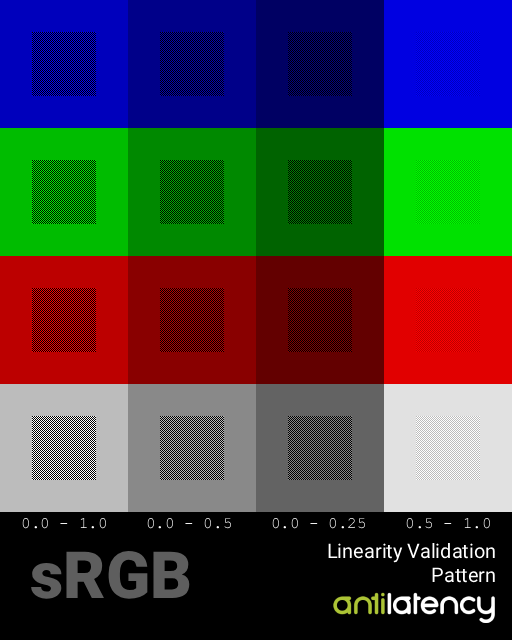
<style>
.page{position:relative;width:512px;height:640px}
.page>*{position:absolute;margin:0}
.t1{font:16px "CourierNewPSMT";color:#ffffff}
.t2{font:20px "Roboto-Regular";color:#ffffff}
.t3{font:65px "Roboto-Black";color:#5e5e5e}
</style>
<div class="page">
<p class="t1" style="left:22px;top:517px;width:468px;height:12px">0.0 - 1.0    0.0 - 0.5    0.0 - 0.25    0.5 - 1.0</p>
<p class="t2" style="left:328px;top:543px;width:167px;height:40px;text-align:right">Linearity Validation<br>Pattern</p>
<p class="t3" style="left:31px;top:551px;width:159px;height:48px">sRGB</p>
</div>
